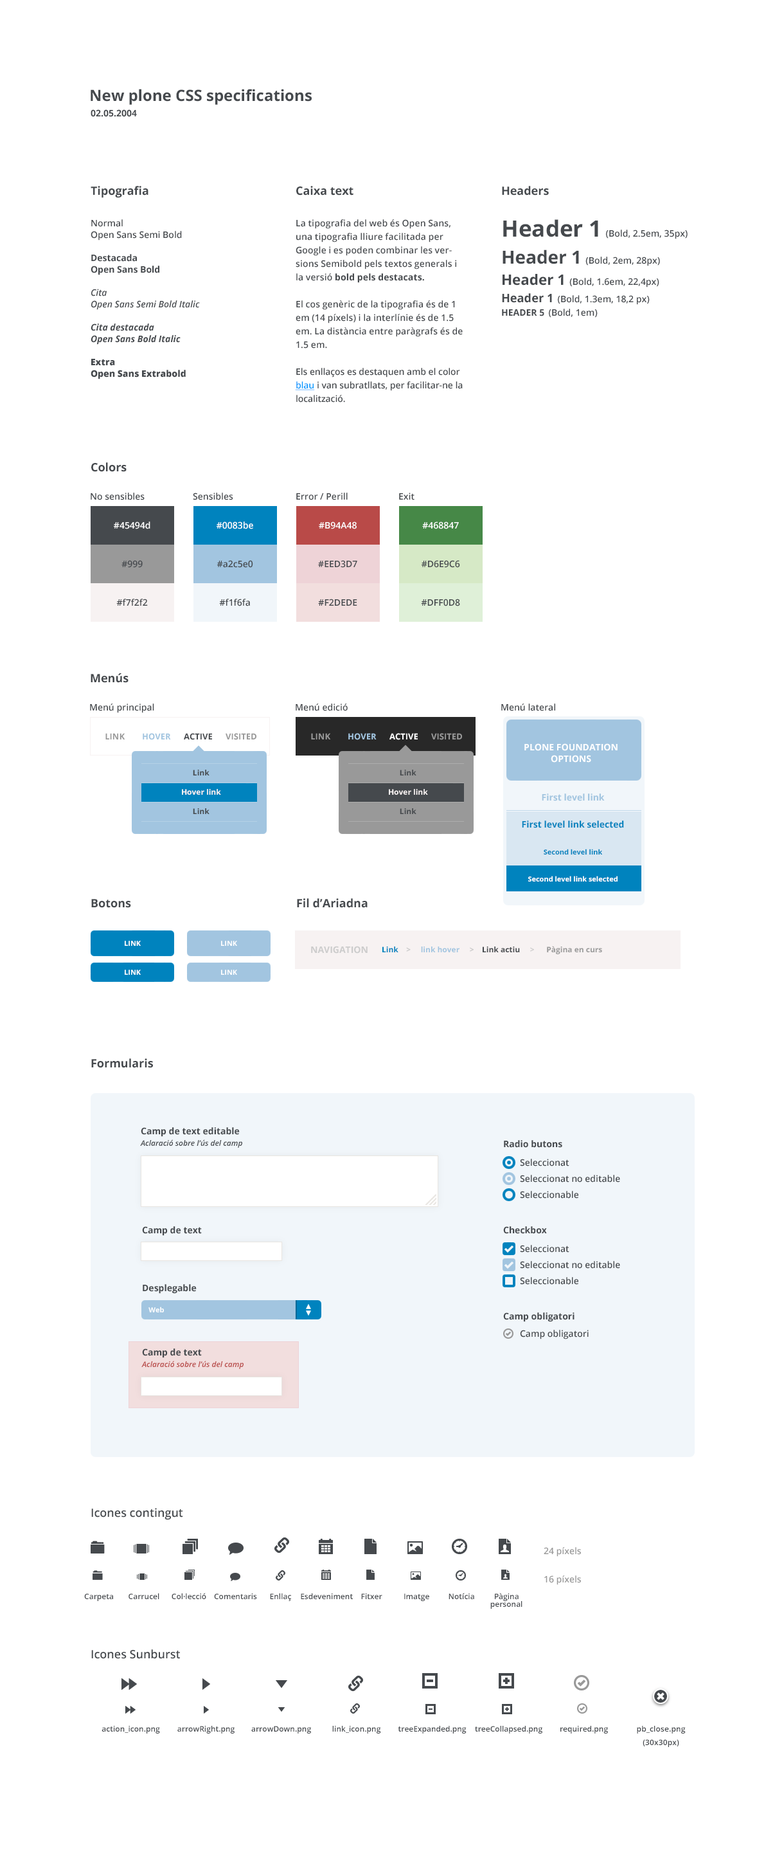
<style>
.page{position:relative;width:784px;height:1857px;background:#ffffff}
.page>*{position:absolute;margin:0}
.t1{font:15.4px "OpenSans-Bold";color:#45494d}
.t2{font:9px "OpenSans-Bold";color:#45494d}
.t3{font:11.6px "OpenSans-Bold";color:#45494d}
.t4{font:9px/11.6px "OpenSans-BoldItalic";color:#45494d}
.t5{font:9px/11.6px "OpenSans-Semibold";color:#45494d}
.t6{font:9px/11.6px "OpenSans-Bold";color:#45494d}
.t7{font:9px/11.6px "OpenSans-SemiboldItalic";color:#45494d}
.t8{font:9px/11.6px "OpenSans-Extrabold";color:#45494d}
.t9{font:9px/13.5px "OpenSans-Semibold";color:#45494d}
.t10{font:9px/13.5px "OpenSans-Bold";color:#45494d}
.t11{font:9px/13.5px "OpenSans-Semibold";color:#0099ff;text-decoration:underline}
.t12{font:9px/17.4px "OpenSans-Semibold";color:#45494d}
.t13{font:22.5px/22.5px "OpenSans-Bold";color:#45494d}
.t14{font:9px/22.5px "OpenSans-Semibold";color:#45494d}
.t15{font:18px/27px "OpenSans-Bold";color:#45494d}
.t16{font:9px/27px "OpenSans-Semibold";color:#45494d}
.t17{font:14.4px/21.2px "OpenSans-Bold";color:#45494d}
.t18{font:9px/21.2px "OpenSans-Semibold";color:#45494d}
.t19{font:11.7px/17.4px "OpenSans-Bold";color:#45494d}
.t20{font:9px "OpenSans-Semibold";color:#45494d}
.t21{font:9px "OpenSans-Semibold";color:#ffffff}
.t22{font:8.4px "OpenSans-Bold";color:#999999}
.t23{font:8.4px "OpenSans-Bold";color:#a2c5e0}
.t24{font:8.4px "OpenSans-Bold";color:#45494d}
.t25{font:8.4px "OpenSans-Bold";color:#ffffff}
.t26{font:9px/11.6px "OpenSans-Bold";color:#ffffff}
.t27{font:7.7px/19.3px "OpenSans-Bold";color:#f7f2f2}
.t28{font:7.7px/19.3px "OpenSans-Bold";color:#45494d}
.t29{font:7.1px "OpenSans-Bold";color:#ffffff}
.t30{font:9px "OpenSans-Bold";color:#cccccc}
.t31{font:7.7px "OpenSans-Bold";color:#999999}
.t32{font:7.7px "OpenSans-Bold";color:#0083be}
.t33{font:7.7px "OpenSans-Bold";color:#c8c8c8}
.t34{font:7.7px "OpenSans-Bold";color:#a2c5e0}
.t35{font:7.7px "OpenSans-Bold";color:#45494d}
.t36{font:7.7px "OpenSans-Bold";color:#cccccc}
.t37{font:7.7px "OpenSans-SemiboldItalic";color:#45494d}
.t38{font:7.7px "OpenSans-SemiboldItalic";color:#b94a48}
.t39{font:11.6px "OpenSans-Semibold";color:#45494d}
.t40{font:9px "OpenSans-Semibold";color:#999999}
.t41{font:7.7px "OpenSans-Semibold";color:#45494d}
.t42{font:7.7px/7.7px "OpenSans-Semibold";color:#45494d}
.t43{font:7.7px/13.5px "OpenSans-Semibold";color:#45494d}
</style>
<div class="page">
<p class="t1" style="left:91px;top:89px;width:221px;height:16px">New plone CSS specifications</p>
<p class="t2" style="left:91px;top:109px;width:46px;height:8px">02.05.2004</p>
<p class="t3" style="left:91px;top:186px;width:58px;height:12px">Tipografia</p>
<p class="t3" style="left:296px;top:186px;width:58px;height:9px">Caixa text</p>
<p class="t3" style="left:502px;top:186px;width:47px;height:9px">Headers</p>
<p class="t4" style="left:91px;top:219px;width:109px;height:160px"><span class="t5">Normal<br>Open Sans Semi Bold <br></span><span class="t6"><br>Destacada<br>Open Sans Bold <br><br></span><span class="t7">Cita<br>Open Sans Semi Bold Italic<br><br></span>Cita destacada<br>Open Sans Bold Italic<br><br><span class="t8">Extra<br>Open Sans Extrabold</span></p>
<p class="t9" style="left:295px;top:219px;width:168px;height:183px">La tipografia del web és Open Sans, una tipografia lliure facilitada per Google i es poden combinar les versions Semibold pels textos generals i la versió <span class="t10">bold pels destacats.<br></span><br>El cos genèric de la tipografia és de 1 em (14 píxels) i la interlínie és de 1.5 em. La distància entre paràgrafs és de 1.5 em.<br><br>Els enllaços es destaquen amb el color <span class="t11">blau </span>i van subratllats, per facilitar-ne la localització.</p>
<p class="t12" style="left:502px;top:219px;width:186px;height:99px"><span class="t13">Header 1 </span><span class="t14">(Bold, 2.5em, 35px)<br></span><span class="t15">Header 1 </span><span class="t16">(Bold, 2em, 28px)<br></span><span class="t17">Header 1 </span><span class="t18">(Bold, 1.6em, 22,4px)<br></span><span class="t19">Header 1 </span>(Bold, 1.3em, 18,2 px)<br><span class="t10">HEADER 5 </span><span class="t9">(Bold, 1em)</span></p>
<p class="t3" style="left:91px;top:462px;width:36px;height:10px">Colors</p>
<p class="t20" style="left:91px;top:492px;width:54px;height:8px">No sensibles</p>
<p class="t20" style="left:193px;top:492px;width:40px;height:8px">Sensibles</p>
<p class="t20" style="left:296px;top:492px;width:52px;height:8px">Error / Perill</p>
<p class="t20" style="left:399px;top:492px;width:16px;height:8px">Exit</p>
<p class="t21" style="left:114px;top:521px;width:36px;height:8px">#45494d</p>
<p class="t21" style="left:217px;top:521px;width:36px;height:8px">#0083be</p>
<p class="t21" style="left:319px;top:521px;width:38px;height:8px">#B94A48</p>
<p class="t21" style="left:422px;top:521px;width:37px;height:8px">#468847</p>
<p class="t20" style="left:122px;top:560px;width:21px;height:8px">#999</p>
<p class="t20" style="left:217px;top:560px;width:36px;height:8px">#a2c5e0</p>
<p class="t20" style="left:318px;top:560px;width:39px;height:8px">#EED3D7</p>
<p class="t20" style="left:422px;top:560px;width:38px;height:8px">#D6E9C6</p>
<p class="t20" style="left:116px;top:599px;width:32px;height:7px">#f7f2f2</p>
<p class="t20" style="left:219px;top:599px;width:31px;height:7px">#f1f6fa</p>
<p class="t20" style="left:318px;top:599px;width:39px;height:7px">#F2DEDE</p>
<p class="t20" style="left:421px;top:599px;width:39px;height:7px">#DFF0D8</p>
<p class="t3" style="left:91px;top:673px;width:38px;height:10px">Menús</p>
<p class="t20" style="left:90px;top:703px;width:64px;height:10px">Menú principal</p>
<p class="t20" style="left:296px;top:703px;width:52px;height:8px">Menú edició</p>
<p class="t20" style="left:501px;top:703px;width:54px;height:8px">Menú lateral</p>
<p class="t22" style="left:105px;top:733px;width:152px;height:7px">LINK        <span class="t23">HOVER      </span><span class="t24">ACTIVE</span>      VISITED</p>
<p class="t22" style="left:311px;top:733px;width:151px;height:7px">LINK        <span class="t23">HOVER      </span><span class="t25">ACTIVE </span>     VISITED</p>
<p class="t26" style="left:525px;top:743px;width:93px;height:19px;text-align:center">PLONE FOUNDATION<br>OPTIONS</p>
<p class="t27" style="left:182px;top:770px;width:39px;height:44px;text-align:center"><span class="t28">Link<br></span>Hover link<br><span class="t28">Link</span></p>
<p class="t3" style="left:91px;top:899px;width:40px;height:9px">Botons</p>
<p class="t3" style="left:297px;top:898px;width:71px;height:10px">Fil d’Ariadna</p>
<p class="t29" style="left:125px;top:941px;width:16px;height:5px">LINK</p>
<p class="t29" style="left:221px;top:941px;width:16px;height:5px">LINK</p>
<p class="t30" style="left:311px;top:946px;width:57px;height:7px">NAVIGATION</p>
<p class="t31" style="left:383px;top:946px;width:219px;height:8px"><span class="t32">Link    </span><span class="t33">&gt;     </span><span class="t34">link hover     </span><span class="t33">&gt;    </span><span class="t35">Link actiu    </span><span class="t36"> &gt;</span>      Pàgina en curs</p>
<p class="t29" style="left:125px;top:969px;width:16px;height:6px">LINK</p>
<p class="t29" style="left:221px;top:969px;width:16px;height:6px">LINK</p>
<p class="t3" style="left:91px;top:1058px;width:62px;height:10px">Formularis</p>
<p class="t2" style="left:141px;top:1127px;width:99px;height:10px">Camp de text editable</p>
<p class="t37" style="left:140px;top:1139px;width:102px;height:9px">Aclaració sobre l’ús del camp</p>
<p class="t2" style="left:504px;top:1140px;width:59px;height:8px">Radio butons</p>
<p class="t20" style="left:520px;top:1158px;width:50px;height:8px">Seleccionat</p>
<p class="t20" style="left:520px;top:1175px;width:100px;height:7px">Seleccionat no editable</p>
<p class="t20" style="left:520px;top:1191px;width:59px;height:7px">Seleccionable</p>
<p class="t2" style="left:142px;top:1226px;width:60px;height:10px">Camp de text</p>
<p class="t2" style="left:503px;top:1226px;width:44px;height:8px">Checkbox</p>
<p class="t20" style="left:520px;top:1245px;width:50px;height:7px">Seleccionat</p>
<p class="t20" style="left:520px;top:1261px;width:100px;height:7px">Seleccionat no editable</p>
<p class="t20" style="left:520px;top:1277px;width:59px;height:7px">Seleccionable</p>
<p class="t2" style="left:143px;top:1284px;width:54px;height:9px">Desplegable</p>
<p class="t29" style="left:149px;top:1306px;width:15px;height:6px">Web</p>
<p class="t2" style="left:503px;top:1312px;width:72px;height:10px">Camp obligatori</p>
<p class="t20" style="left:520px;top:1329px;width:69px;height:10px">Camp obligatori</p>
<p class="t2" style="left:142px;top:1348px;width:60px;height:10px">Camp de text</p>
<p class="t38" style="left:141px;top:1360px;width:103px;height:9px">Aclaració sobre l’ús del camp</p>
<p class="t39" style="left:91px;top:1508px;width:92px;height:12px">Icones contingut</p>
<p class="t40" style="left:544px;top:1547px;width:37px;height:9px">24 píxels</p>
<p class="t40" style="left:545px;top:1575px;width:36px;height:10px">16 píxels</p>
<p class="t41" style="left:84px;top:1593px;width:29px;height:8px">Carpeta</p>
<p class="t41" style="left:129px;top:1593px;width:30px;height:6px">Carrucel</p>
<p class="t41" style="left:172px;top:1592px;width:34px;height:7px">Col·lecció</p>
<p class="t41" style="left:214px;top:1593px;width:43px;height:6px">Comentaris</p>
<p class="t41" style="left:270px;top:1593px;width:21px;height:8px">Enllaç</p>
<p class="t41" style="left:301px;top:1593px;width:52px;height:6px">Esdeveniment</p>
<p class="t41" style="left:361px;top:1593px;width:22px;height:6px">Fitxer</p>
<p class="t41" style="left:404px;top:1593px;width:25px;height:8px">Imatge</p>
<p class="t41" style="left:449px;top:1592px;width:25px;height:7px">Notícia</p>
<p class="t42" style="left:491px;top:1592px;width:32px;height:16px;text-align:center">Pàgina<br>personal</p>
<p class="t39" style="left:91px;top:1649px;width:89px;height:10px">Icones Sunburst</p>
<p class="t41" style="left:102px;top:1725px;width:58px;height:8px">action_icon.png</p>
<p class="t41" style="left:177px;top:1725px;width:58px;height:8px">arrowRight.png</p>
<p class="t41" style="left:251px;top:1725px;width:60px;height:8px">arrowDown.png</p>
<p class="t41" style="left:332px;top:1725px;width:49px;height:8px">link_icon.png</p>
<p class="t41" style="left:398px;top:1725px;width:69px;height:8px">treeExpanded.png</p>
<p class="t41" style="left:475px;top:1725px;width:68px;height:8px">treeCollapsed.png</p>
<p class="t41" style="left:561px;top:1725px;width:47px;height:8px">required.png</p>
<p class="t43" style="left:637px;top:1725px;width:49px;height:22px;text-align:center">pb_close.png (30x30px)</p>
</div>
